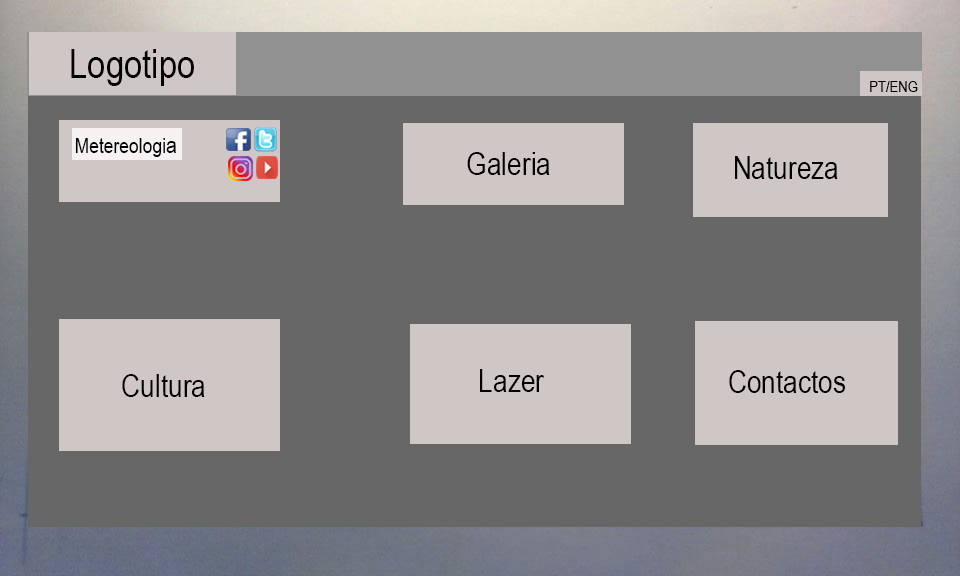
<style>
.page{position:relative;width:960px;height:576px;background:#686767}
.page>*{position:absolute;margin:0}
.t1{font:40px "ArialNarrow";color:#000000}
.t2{font:16px "ArialNarrow";color:#000000}
.t3{font:21.3px "ArialNarrow";color:#000000}
.t4{font:24px "ArialNarrow";color:#000000}
.t5{font:32px "ArialNarrow";color:#000000}
</style>
<div class="page">
<p class="t1" style="left:71px;top:49px;width:123px;height:37px">Logotipo</p>
<p class="t2" style="left:870px;top:81px;width:48px;height:11px">PT/ENG</p>
<p class="t3" style="left:75px;top:138px;width:101px;height:19px">Metereologi<span class="t4">a</span></p>
<p class="t5" style="left:467px;top:152px;width:83px;height:23px">Galeria</p>
<p class="t5" style="left:735px;top:156px;width:103px;height:23px">Natureza</p>
<p class="t5" style="left:122px;top:374px;width:83px;height:23px">Cultura</p>
<p class="t5" style="left:480px;top:369px;width:64px;height:23px">Lazer</p>
<p class="t5" style="left:729px;top:370px;width:116px;height:23px">Contactos</p>
</div>
